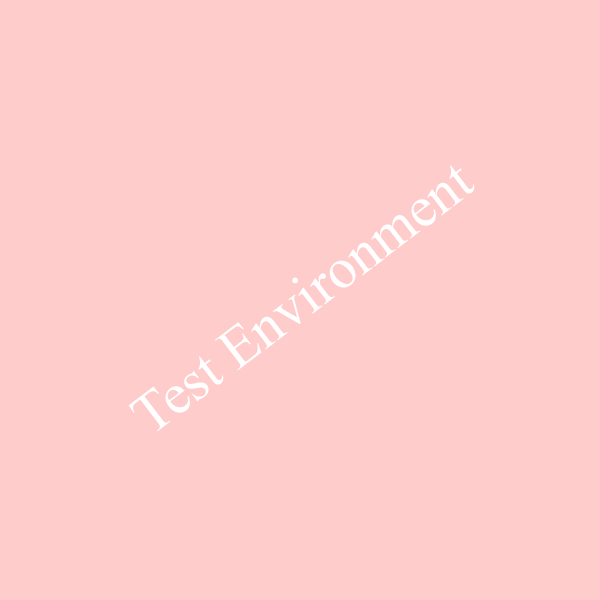
<style>
.page{position:relative;width:600px;height:600px;background:#ffcccc}
.page>*{position:absolute;margin:0}
.t1{font:57.6px "TimesNewRomanPSMT";color:#ffffff}
</style>
<div class="page">
<p class="t1" style="left:128px;top:165px;width:347px;height:267px;rotate:-37deg">Test Environment</p>
</div>
